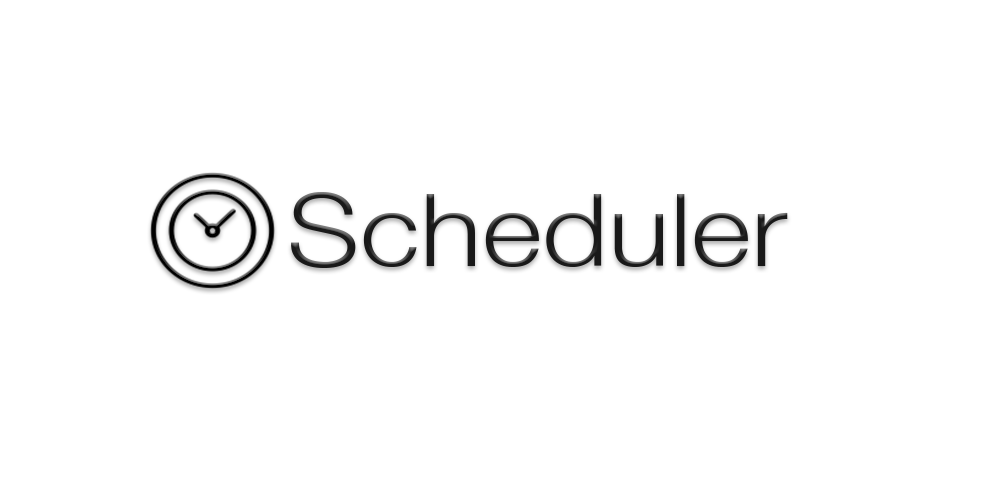
<style>
.page{position:relative;width:1000px;height:500px;background:#ffffff}
.page>*{position:absolute;margin:0}
.t1{font:100.7px "HelveticaNeue-Light";color:#191919;scale:1.15 1}
</style>
<div class="page">
<p class="t1" style="left:291px;top:192px;width:497px;height:76px">Scheduler</p>
</div>
